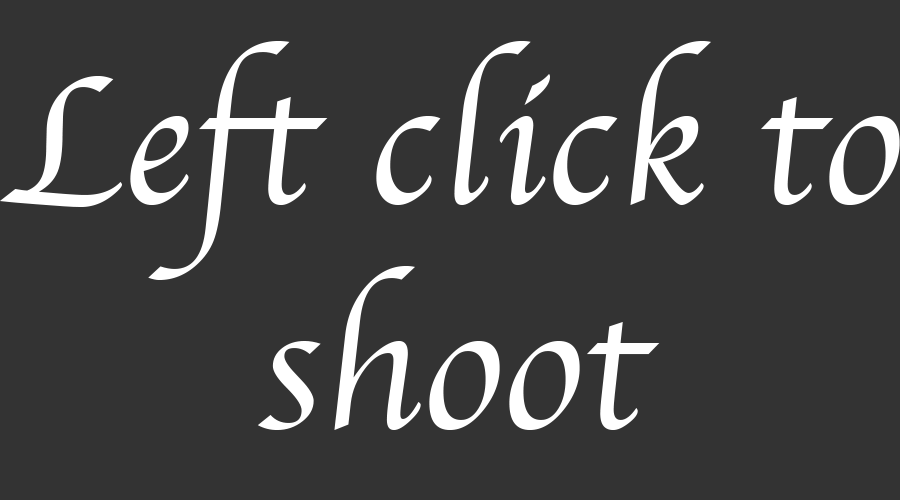
<style>
.page{position:relative;width:900px;height:500px;background:#333333}
.page>*{position:absolute;margin:0}
.t1{font:187.2px "Apple-Chancery";color:#ffffff}
</style>
<div class="page">
<p class="t1" style="left:0px;top:41px;width:900px;height:389px;text-align:center">Left click to<br>shoot</p>
</div>
